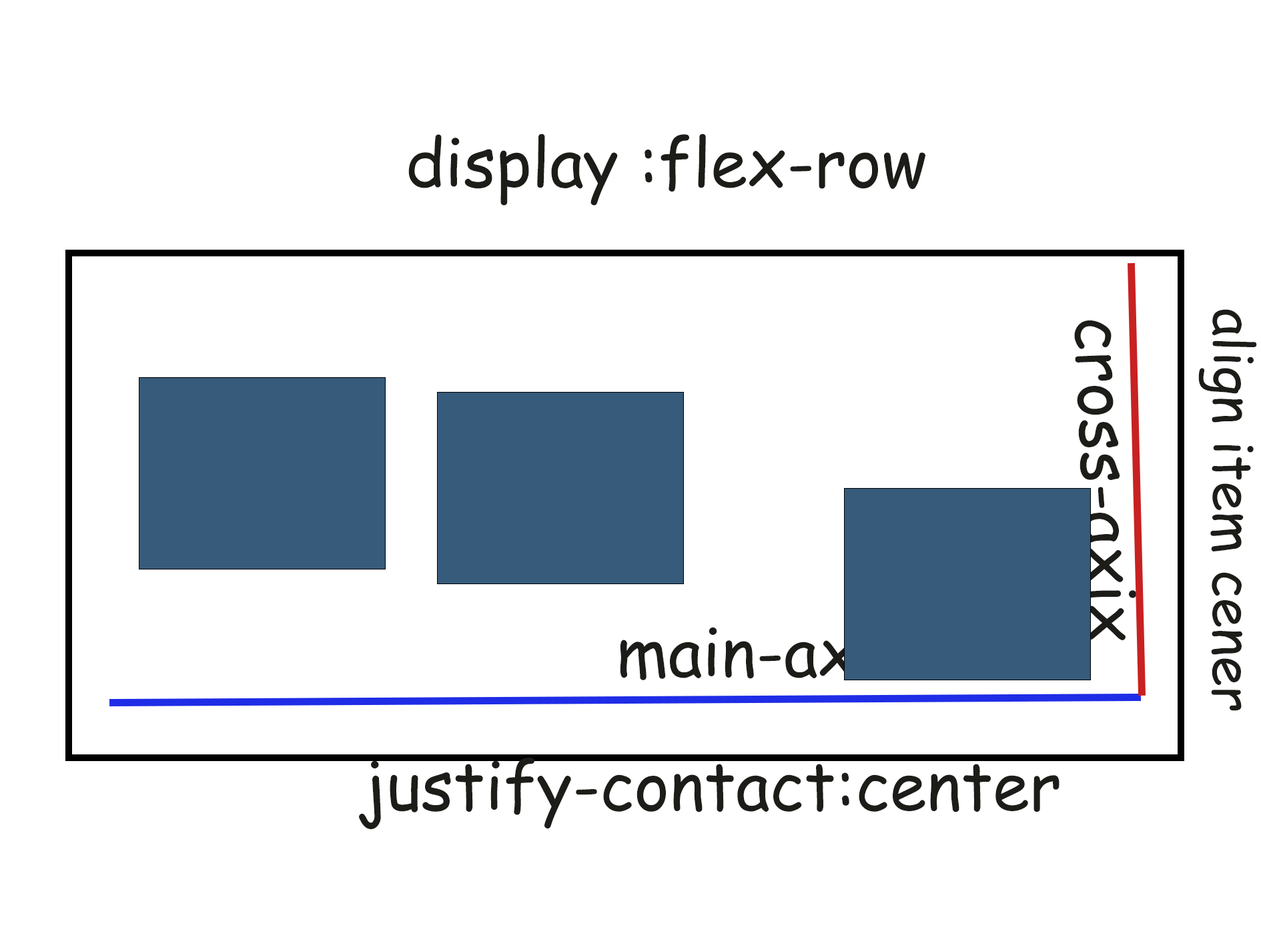
<style>
.page{position:relative;width:1261px;height:946px;background:#ffffff}
.page>*{position:absolute;margin:0}
.t1{font:66.7px "ComicSansMS";color:#1c1c18}
.t2{font:54.3px "ComicSansMS";color:#1c1c18}
</style>
<div class="page">
<p class="t1" style="left:408px;top:133px;width:518px;height:73px">display :flex-row</p>
<p class="t2" style="left:1198px;top:309px;width:59px;height:402px;rotate:90deg">align item cener</p>
<p class="t1" style="left:1074px;top:320px;width:63px;height:320px;rotate:88deg">cross-axix</p>
<p class="t1" style="left:620px;top:627px;width:293px;height:53px">main-axix</p>
<p class="t1" style="left:359px;top:757px;width:701px;height:72px">justify-contact:center</p>
</div>
